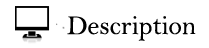
<style>
.page{position:relative;width:209px;height:48px;background:#ffffff}
.page>*{position:absolute;margin:0}
.t1{font:27px "BellMT";color:#000000}
</style>
<div class="page">
<p class="t1" style="left:67px;top:16px;width:129px;height:25px">Description</p>
</div>
